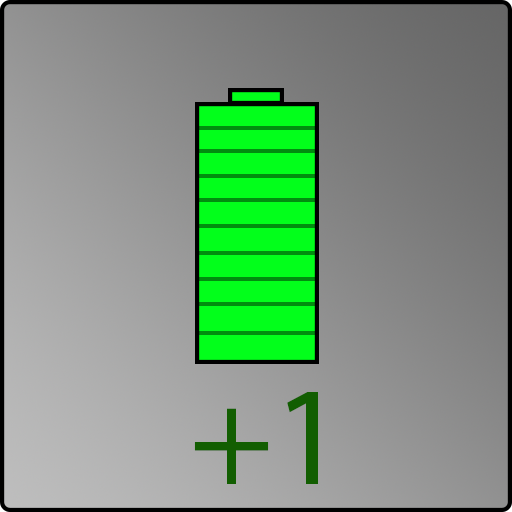
<style>
.page{position:relative;width:512px;height:512px}
.page>*{position:absolute;margin:0}
.t1{font:141.7px "MyriadPro-Regular";color:#125e01}
</style>
<div class="page">
<p class="t1" style="left:194px;top:392px;width:124px;height:92px">+1</p>
</div>
